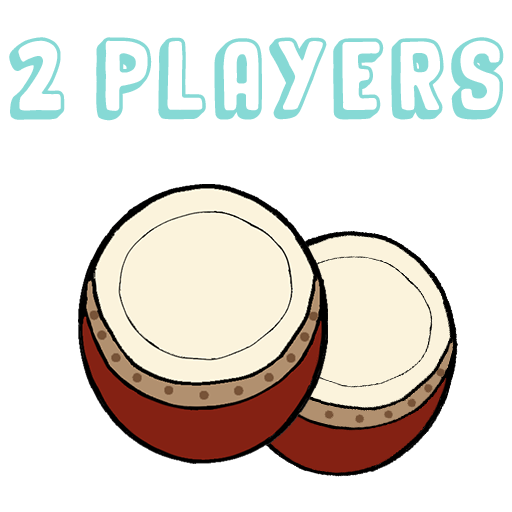
<style>
.page{position:relative;width:512px;height:512px;background:#ffffff}
.page>*{position:absolute;margin:0}
.t1{font:50px "OrganicRelief";letter-spacing:0.1em;color:#86d9d5}
</style>
<div class="page">
<p class="t1" style="left:9px;top:37px;width:495px;height:84px">2 PLAYERS</p>
</div>
